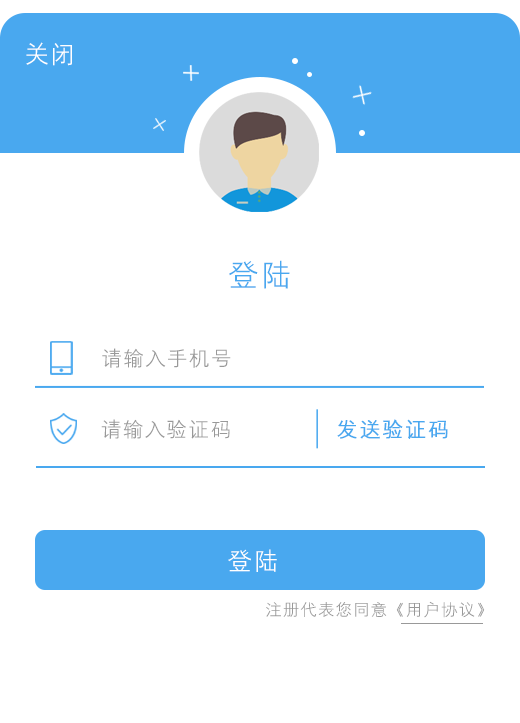
<style>
.page{position:relative;width:520px;height:723px;background:#ffffff}
.page>*{position:absolute;margin:0}
.t1{font:24px "HYZhongJianHeiJ";letter-spacing:0.1em;color:#ffffff}
.t2{font:30px "HYZhongJianHeiJ";letter-spacing:0.1em;color:#49a8ef}
.t3{font:20px "HYZhongJianHeiJ";letter-spacing:0.1em;color:#999999}
.t4{font:20.3px "HYZhongJianHeiJ";letter-spacing:0.1em;color:#49a8ef;font-weight:bold}
.t5{font:16px "HYZhongJianHeiJ";letter-spacing:0.1em;color:#999999}
</style>
<div class="page">
<p class="t1" style="left:26px;top:42px;width:46px;height:24px">关闭</p>
<p class="t2" style="left:229px;top:260px;width:61px;height:29px">登陆</p>
<p class="t3" style="left:102px;top:348px;width:129px;height:20px">请输入手机号</p>
<p class="t3" style="left:101px;top:419px;width:129px;height:20px">请输入验证码</p>
<p class="t4" style="left:337px;top:419px;width:111px;height:20px">发送验证码</p>
<p class="t1" style="left:228px;top:549px;width:49px;height:23px">登陆</p>
<p class="t5" style="left:266px;top:601px;width:219px;height:17px">注册代表您同意《用户协议》</p>
</div>
